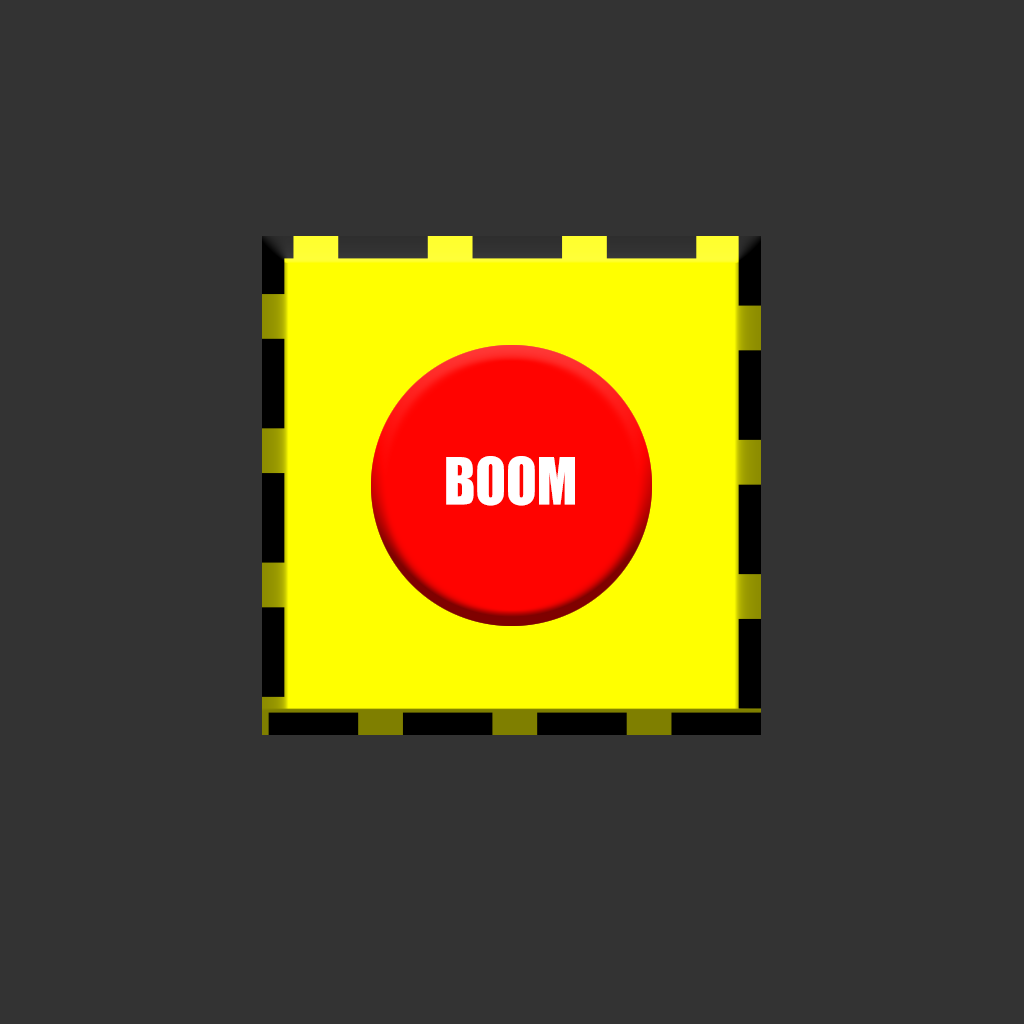
<style>
.page{position:relative;width:1024px;height:1024px;background:#333333}
.page>*{position:absolute;margin:0}
.t1{font:60px "Impact";color:#ffffff;scale:0.94 1}
</style>
<div class="page">
<p class="t1" style="left:446px;top:456px;width:129px;height:50px">BOOM</p>
</div>
